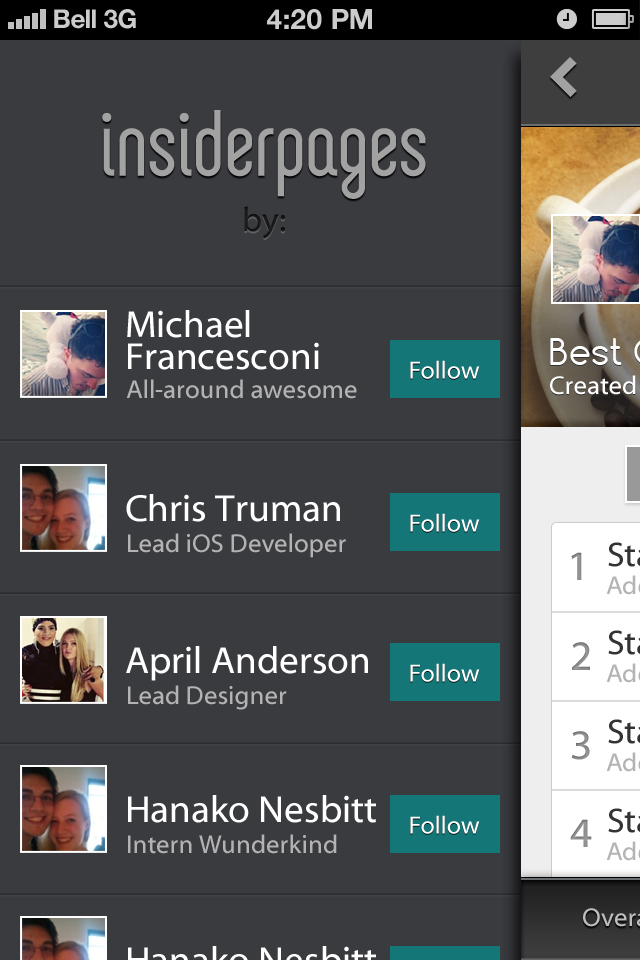
<style>
.page{position:relative;width:640px;height:960px;background:#3a3b3f}
.page>*{position:absolute;margin:0}
.t1{font:26px "HelveticaNeue-Bold";color:#cccccc}
.t2{font:26px "HelveticaNeue-Bold";color:#cccccc;text-transform:uppercase}
.t3{font:28px "HelveticaNeue-Bold";color:#cccccc;text-transform:uppercase}
.t4{font:34px "MyriadWebPro";color:#1a1a1a}
.t5{font:38px/32px "MyriadWebPro";color:#ffffff}
.t6{font:25px "MyriadWebPro";color:#ffffff}
.t7{font:26px "MyriadWebPro";color:#b4b3b4}
.t8{font:38px "MyriadWebPro";color:#ffffff}
</style>
<div class="page">
<p class="t1" style="left:54px;top:9px;width:42px;height:20px">Bell</p>
<p class="t2" style="left:104px;top:9px;width:32px;height:20px">3G</p>
<p class="t3" style="left:267px;top:9px;width:105px;height:21px">4:20 pM</p>
<p class="t4" style="left:244px;top:206px;width:41px;height:33px">by:</p>
<p class="t5" style="left:127px;top:310px;width:192px;height:60px">Michael <br>Francesconi</p>
<p class="t6" style="left:410px;top:360px;width:70px;height:19px">Follow</p>
<p class="t7" style="left:126px;top:379px;width:231px;height:20px">All-around awesome</p>
<p class="t8" style="left:126px;top:494px;width:214px;height:28px">Chris Truman</p>
<p class="t6" style="left:410px;top:513px;width:70px;height:19px">Follow</p>
<p class="t7" style="left:128px;top:533px;width:218px;height:25px">Lead iOS Developer</p>
<p class="t8" style="left:126px;top:646px;width:242px;height:35px">April Anderson</p>
<p class="t6" style="left:410px;top:663px;width:70px;height:19px">Follow</p>
<p class="t7" style="left:128px;top:685px;width:159px;height:25px">Lead Designer</p>
<p class="t8" style="left:128px;top:795px;width:248px;height:28px">Hanako Nesbitt</p>
<p class="t6" style="left:410px;top:815px;width:70px;height:19px">Follow</p>
<p class="t7" style="left:128px;top:834px;width:209px;height:20px">Intern Wunderkind</p>
</div>
